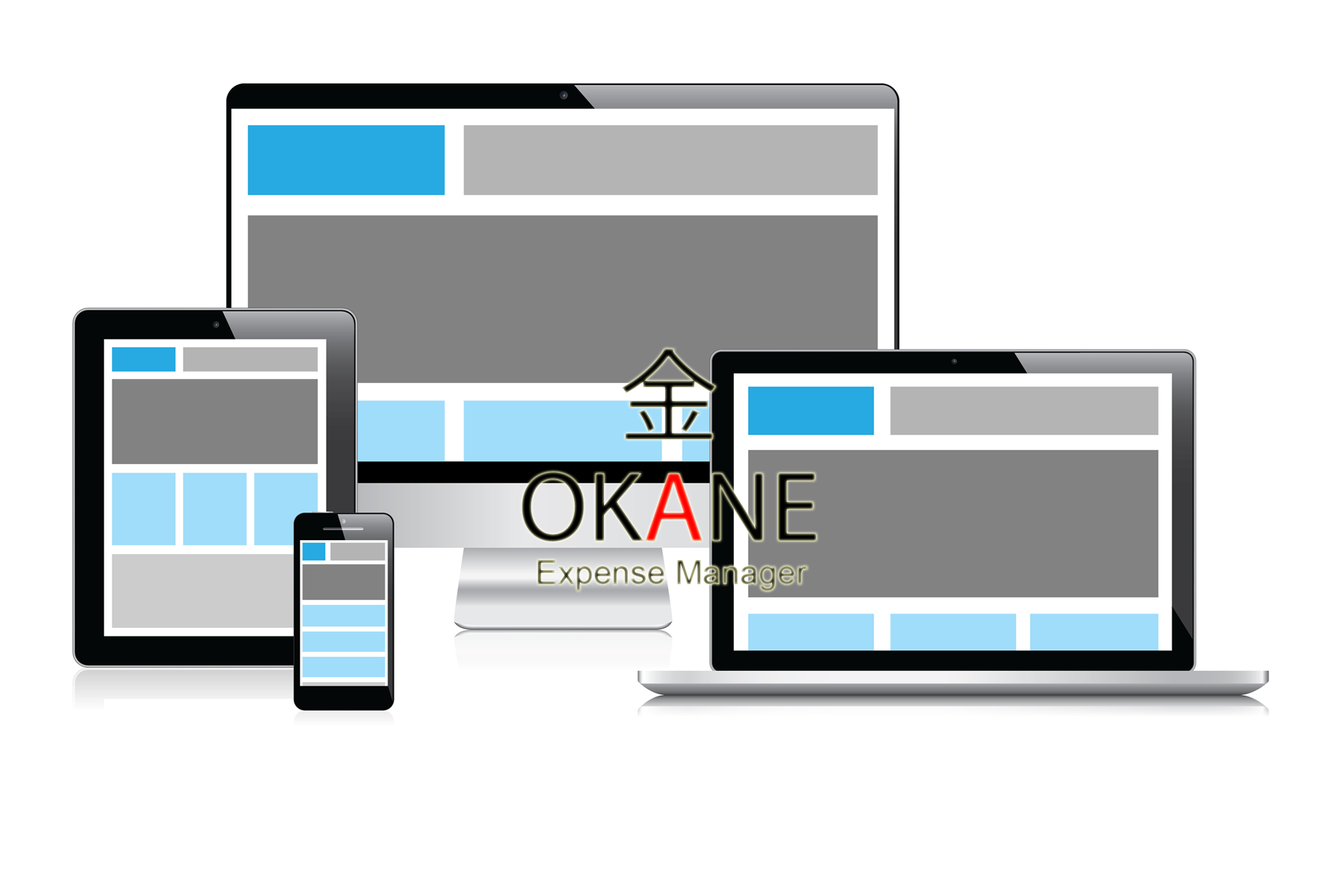
<style>
.page{position:relative;width:1338px;height:891px;background:#ffffff}
.page>*{position:absolute;margin:0}
.t1{font:100.3px "KozGoPr6N-Regular"}
.t2{font:100.3px "MyriadPro-Regular"}
.t3{font:33.4px "ArialMT"}
</style>
<div class="page">
<p class="t1" style="left:621px;top:348px;width:95px;height:92px">金</p>
<p class="t2" style="left:522px;top:471px;width:295px;height:71px">OKANE</p>
<p class="t3" style="left:537px;top:560px;width:271px;height:31px">Expense Manager</p>
</div>
